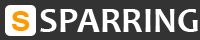
<style>
.page{position:relative;width:200px;height:40px;background:#333333}
.page>*{position:absolute;margin:0}
.t1{font:36px "Tunga-Bold";color:#ff9900}
.t2{font:36px "Candara-Bold";color:#ffffff}
</style>
<div class="page">
<p class="t1" style="left:12px;top:11px;width:18px;height:20px">S</p>
<p class="t2" style="left:40px;top:9px;width:158px;height:23px">SPARRING</p>
</div>
